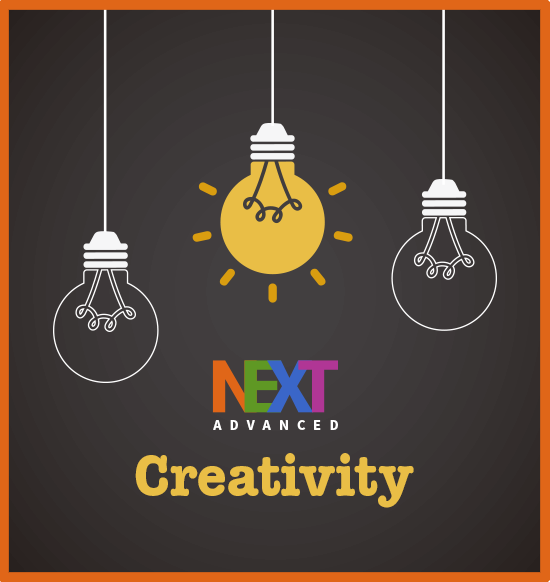
<style>
.page{position:relative;width:550px;height:582px}
.page>*{position:absolute;margin:0}
.t1{font:14.3px "SourceSansPro-Bold";letter-spacing:0.56em;color:#ffffff;text-transform:uppercase}
.t2{font:57.2px "AmericanTypewriterStd-Bold";color:#e9be46;scale:0.92 1}
</style>
<div class="page">
<p class="t1" style="left:213px;top:420px;width:125px;height:10px">Advanced</p>
<p class="t2" style="left:135px;top:453px;width:279px;height:55px">Creativity</p>
</div>
